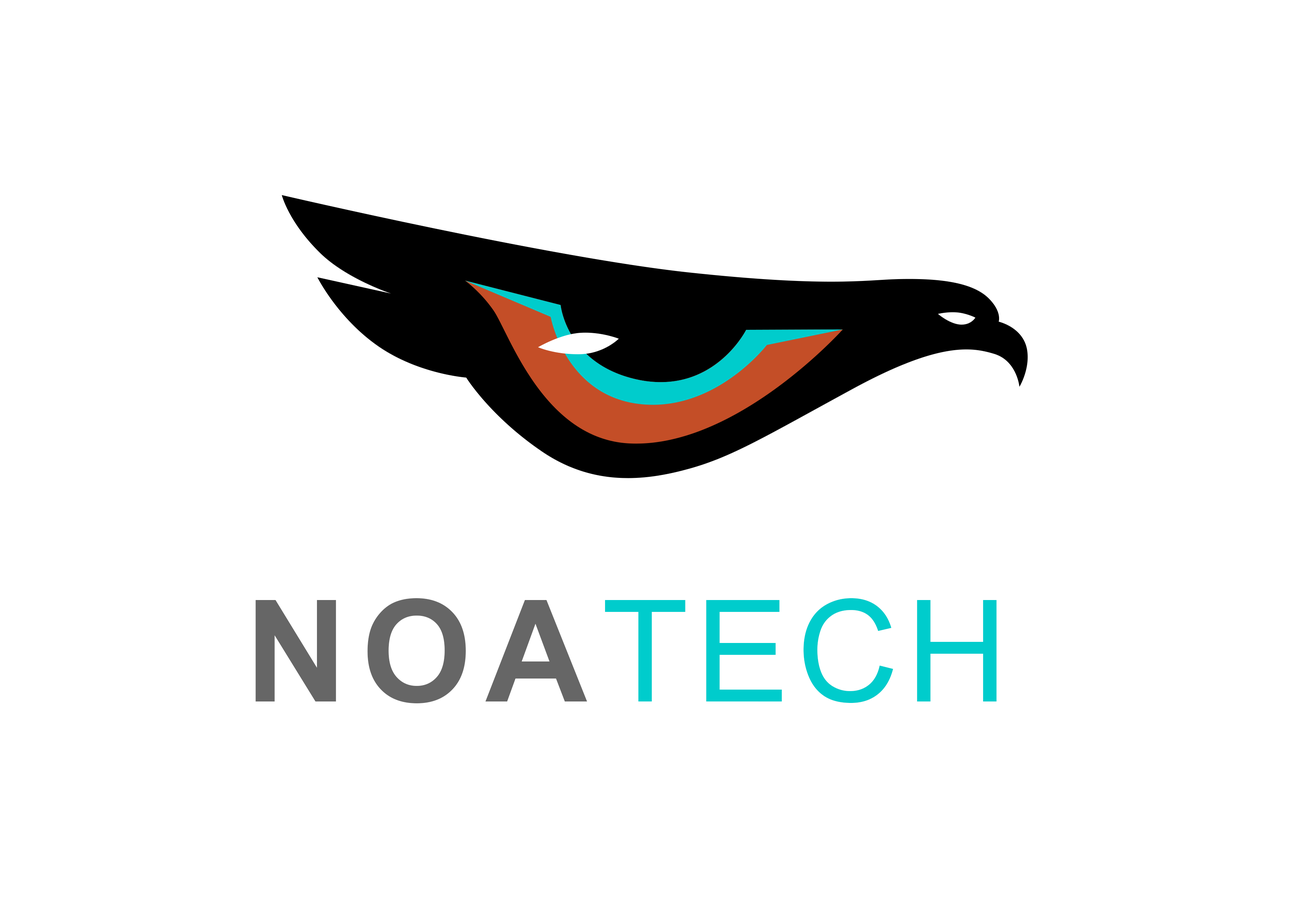
<style>
.page{position:relative;width:1299px;height:918px;background:#ffffff}
.page>*{position:absolute;margin:0}
.t1{font:141.3px "ArialMT";letter-spacing:0.05em;color:#00cccc}
.t2{font:141.3px "Arial-BoldMT";letter-spacing:0.1em;color:#666666}
</style>
<div class="page">
<p class="t1" style="left:255px;top:598px;width:742px;height:105px"><span class="t2">NOA</span>TECH</p>
</div>
